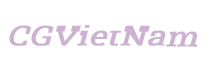
<style>
.page{position:relative;width:210px;height:80px;background:#ffffff}
.page>*{position:absolute;margin:0}
.t1{font:27.8px "RobotoSlab-Regular";color:#ccb1d0;font-weight:bold;scale:1.2 1}
.t2{font:27.8px "OratorStd";color:#000000;font-style:italic;scale:1.2 1}
</style>
<div class="page">
<p class="t1" style="left:9px;top:25px;width:189px;height:22px">CGVietNam<br><br><span class="t2">mmm</span></p>
</div>
